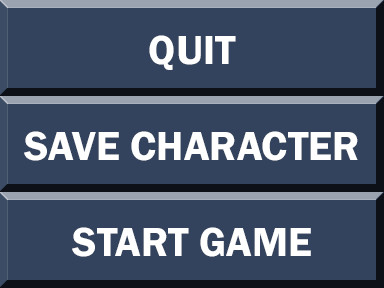
<style>
.page{position:relative;width:384px;height:288px;background:#33435d}
.page>*{position:absolute;margin:0}
.t1{font:42px "FranklinGothic-Demi";color:#ffffff}
</style>
<div class="page">
<p class="t1" style="left:149px;top:35px;width:87px;height:35px">QUIT</p>
<p class="t1" style="left:24px;top:131px;width:334px;height:30px">SAVE CHARACTER</p>
<p class="t1" style="left:72px;top:227px;width:239px;height:30px">START GAME</p>
</div>
